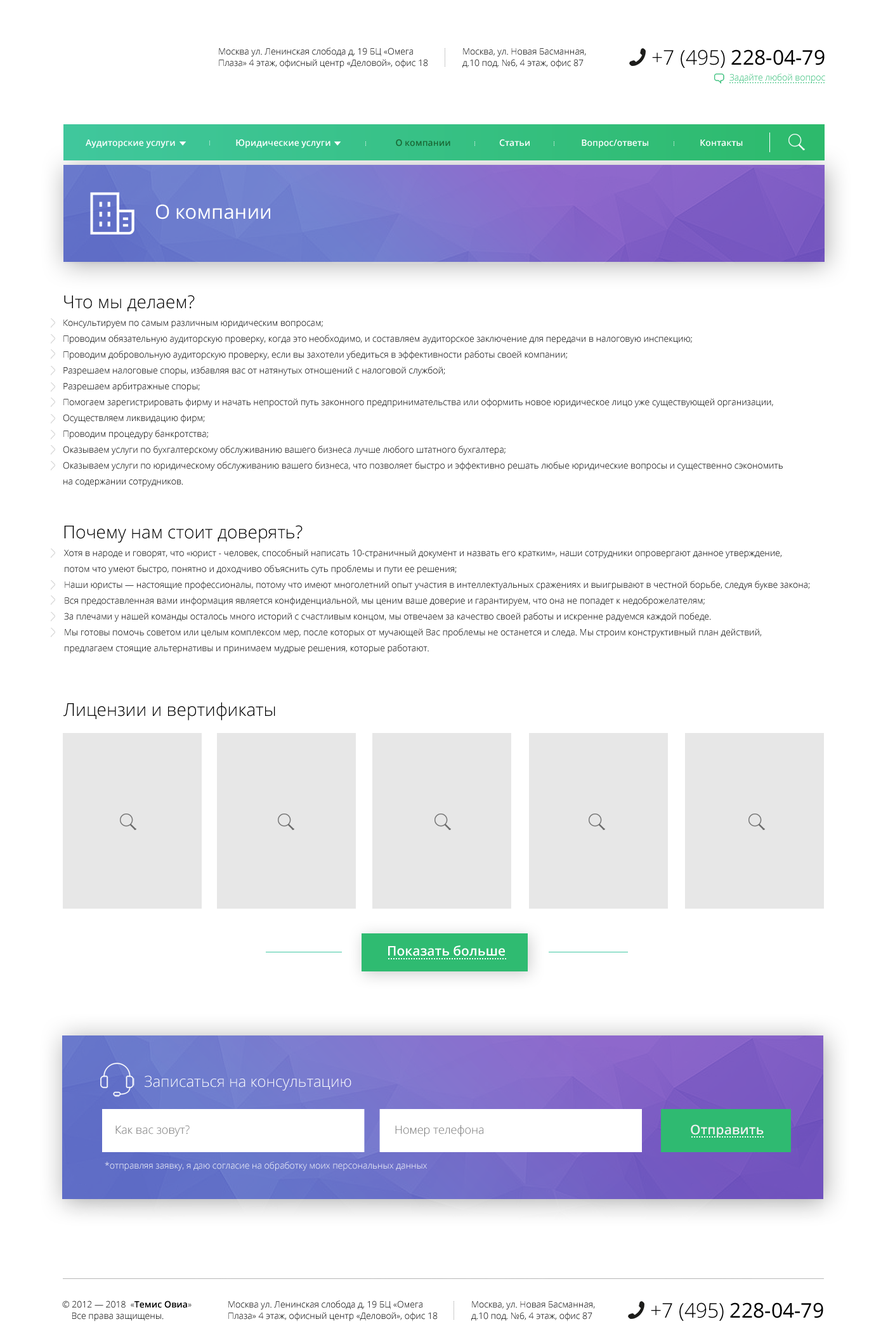
<style>
.page{position:relative;width:888px;height:1343px;background:#ffffff}
.page>*{position:absolute;margin:0}
.t1{font:8.9px/11.4px "OpenSans-Light";color:#000000}
.t2{font:20.3px "OpenSans";color:#000000}
.t3{font:20.3px "OpenSans-Light";color:#000000}
.t4{font:8.9px "OpenSans-Light";color:#31bd76}
.t5{font:8.9px "OpenSans-Semibold";color:#ffffff}
.t6{font:8.9px "OpenSans-Semibold";color:#196734}
.t7{font:19.7px "OpenSans";color:#ffffff}
.t8{font:17.8px "OpenSans-Light";color:#000000}
.t9{font:8.9px/15.9px "OpenSans-Light";color:#000000}
.t10{font:13.3px "OpenSans-Semibold";color:#ffffff}
.t11{font:15.2px "OpenSans-Light";color:#ffffff}
.t12{font:11.4px "OpenSans-Light";color:#767676}
.t13{font:13.3px "OpenSans-Semibold";color:#efefef}
.t14{font:8.9px "OpenSans-Light";color:#ffffff}
.t15{font:8.9px/11.4px "OpenSans-Semibold";color:#000000}
</style>
<div class="page">
<p class="t1" style="left:219px;top:48px;width:209px;height:20px">Москва ул. Ленинская слобода д, 19 БЦ «Омега <br>Плаза» 4 этаж, офисный центр «Деловой», офис 18</p>
<p class="t1" style="left:462px;top:48px;width:124px;height:20px">Москва, ул. Новая Басманная, <br>д.10 под. №6, 4 этаж, офис 87</p>
<p class="t2" style="left:652px;top:49px;width:172px;height:19px"><span class="t3">+7 (495) </span>228-04-79</p>
<p class="t4" style="left:729px;top:74px;width:96px;height:9px">Задайте любой вопрос</p>
<p class="t5" style="left:86px;top:139px;width:657px;height:9px">Аудиторские услуги                          Юридические услуги                           <span class="t6"> О компании </span>                    Статьи                      Вопрос/ответы                      Контакты</p>
<p class="t7" style="left:156px;top:204px;width:114px;height:15px">О компании</p>
<p class="t8" style="left:64px;top:295px;width:131px;height:16px">Что мы делаем?</p>
<p class="t9" style="left:63px;top:320px;width:720px;height:167px">Консультируем по самым различным юридическим вопросам;<br>Проводим обязательную аудиторскую проверку, когда это необходимо, и составляем аудиторское заключение для передачи в налоговую инспекцию;<br>Проводим добровольную аудиторскую проверку, если вы захотели убедиться в эффективности работы своей компании;<br>Разрешаем налоговые споры, избавляя вас от натянутых отношений с налоговой службой;<br>Разрешаем арбитражные споры;<br>Помогаем зарегистрировать фирму и начать непростой путь законного предпринимательства или оформить новое юридическое лицо уже существующей организации,<br>Осуществляем ликвидацию фирм;<br>Проводим процедуру банкротства;<br>Оказываем услуги по бухгалтерскому обслуживанию вашего бизнеса лучше любого штатного бухгалтера;<br>Оказываем услуги по юридическому обслуживанию вашего бизнеса, что позволяет быстро и эффективно решать любые юридические вопросы и существенно сэкономить <br>на содержании сотрудников.</p>
<p class="t8" style="left:64px;top:525px;width:238px;height:18px">Почему нам стоит доверять?</p>
<p class="t9" style="left:64px;top:549px;width:746px;height:105px">Хотя в народе и говорят, что «юрист - человек, способный написать 10-страничный документ и назвать его кратким», наши сотрудники опровергают данное утверждение, <br>потом что умеют быстро, понятно и доходчиво объяснить суть проблемы и пути ее решения;<br>Наши юристы — настоящие профессионалы, потому что имеют многолетний опыт участия в интеллектуальных сражениях и выигрывают в честной борьбе, следуя букве закона;<br>Вся предоставленная вами информация является конфиденциальной, мы ценим ваше доверие и гарантируем, что она не попадет к недоброжелателям;<br>За плечами у нашей команды осталось много историй с счастливым концом, мы отвечаем за качество своей работы и искренне радуемся каждой победе.<br>Мы готовы помочь советом или целым комплексом мер, после которых от мучающей Вас проблемы не останется и следа. Мы строим конструктивный план действий, <br>предлагаем стоящие альтернативы и принимаем мудрые решения, которые работают.</p>
<p class="t8" style="left:63px;top:702px;width:212px;height:18px">Лицензии и вертификаты</p>
<p class="t10" style="left:388px;top:946px;width:117px;height:10px">Показать больше</p>
<p class="t11" style="left:145px;top:1076px;width:206px;height:15px">Записаться на консультацию</p>
<p class="t12" style="left:115px;top:1126px;width:75px;height:11px">Как вас зовут?</p>
<p class="t12" style="left:395px;top:1125px;width:88px;height:12px">Номер телефона</p>
<p class="t13" style="left:691px;top:1124px;width:73px;height:14px">Отправить</p>
<p class="t14" style="left:105px;top:1162px;width:322px;height:9px">*отправляя заявку, я даю согласие на обработку моих персональных данных</p>
<p class="t1" style="left:62px;top:1301px;width:130px;height:21px">© 2012 — 2018  «<span class="t15">Темис Овиа</span>» <br>    Все права защищены.</p>
<p class="t1" style="left:228px;top:1301px;width:210px;height:21px">Москва ул. Ленинская слобода д, 19 БЦ «Омега <br>Плаза» 4 этаж, офисный центр «Деловой», офис 18</p>
<p class="t1" style="left:471px;top:1301px;width:124px;height:21px">Москва, ул. Новая Басманная, <br>д.10 под. №6, 4 этаж, офис 87</p>
<p class="t2" style="left:651px;top:1303px;width:172px;height:18px"><span class="t3">+7 (495) </span>228-04-79</p>
</div>
